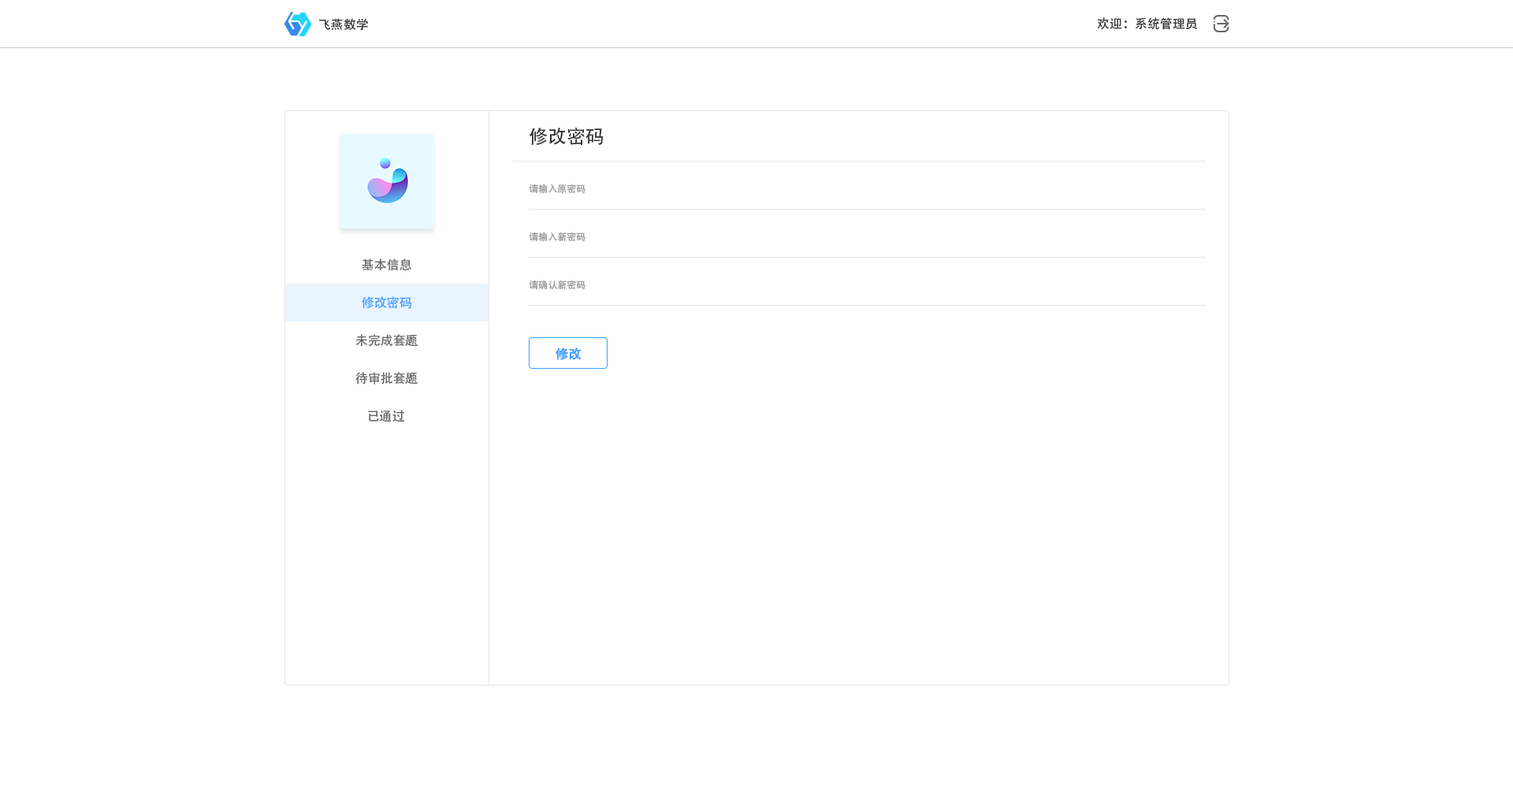
<style>
.page{position:relative;width:1513px;height:788px;background:#ffffff}
.page>*{position:absolute;margin:0}
.t1{font:12.6px "AdobeHeitiStd-Regular";color:#333333}
.t2{font:18.9px "AdobeHeitiStd-Regular";color:#333333}
.t3{font:9.5px "AdobeHeitiStd-Regular";color:#999999}
.t4{font:12.6px "AdobeHeitiStd-Regular";color:#666666}
.t5{font:12.6px "AdobeHeitiStd-Regular";color:#409eff}
.t6{font:12.6px "AdobeHeitiStd-Regular";color:#409eff;font-weight:bold}
</style>
<div class="page">
<p class="t1" style="left:1097px;top:17px;width:101px;height:13px">欢迎：系统管理员</p>
<p class="t1" style="left:318px;top:18px;width:50px;height:13px">飞燕数学</p>
<p class="t2" style="left:529px;top:128px;width:74px;height:17px">修改密码</p>
<p class="t3" style="left:529px;top:184px;width:57px;height:10px">请输入原密码</p>
<p class="t3" style="left:529px;top:232px;width:57px;height:10px">请输入新密码</p>
<p class="t4" style="left:362px;top:258px;width:50px;height:13px">基本信息</p>
<p class="t3" style="left:529px;top:280px;width:57px;height:10px">请确认新密码</p>
<p class="t5" style="left:362px;top:296px;width:49px;height:13px">修改密码</p>
<p class="t4" style="left:355px;top:334px;width:63px;height:13px">未完成套题</p>
<p class="t6" style="left:556px;top:348px;width:26px;height:12px">修改</p>
<p class="t4" style="left:355px;top:372px;width:63px;height:13px">待审批套题</p>
<p class="t4" style="left:368px;top:410px;width:37px;height:12px">已通过</p>
</div>
